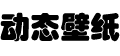
<style>
.page{position:relative;width:120px;height:56px;background:#ffffff}
.page>*{position:absolute;margin:0}
.t1{font:30px "STHupo";color:#000000}
</style>
<div class="page">
<p class="t1" style="left:0px;top:12px;width:120px;height:30px">动态壁纸</p>
</div>
